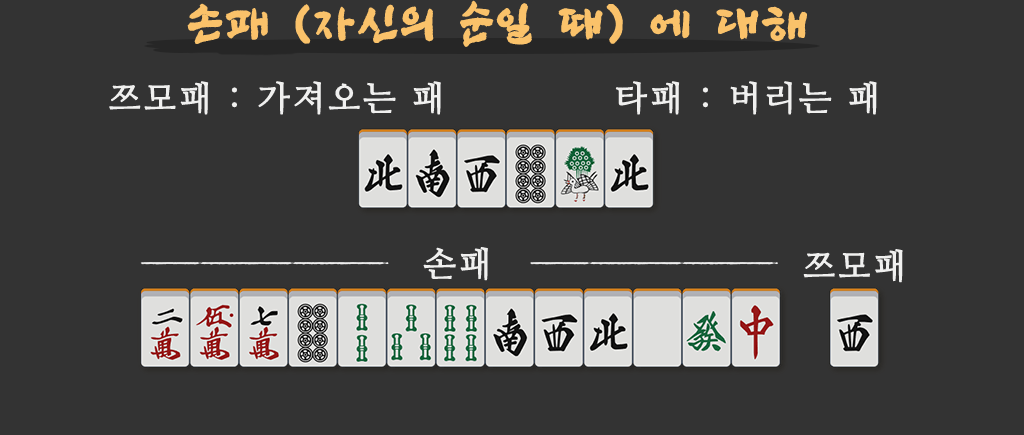
<style>
.page{position:relative;width:1024px;height:435px;background:#333333}
.page>*{position:absolute;margin:0}
.t1{font:48px "SangSangRockOTF";letter-spacing:0.06em;color:#fac26a;font-weight:bold}
.t2{font:34px "NanumMyeongjo";letter-spacing:0.06em;color:#f0f0ef;font-weight:bold}
</style>
<div class="page">
<p class="t1" style="left:187px;top:0px;width:620px;height:47px">손패 (자신의 순일 때) 에 대해</p>
<p class="t2" style="left:109px;top:81px;width:332px;height:34px">쯔모패 : 가져오는 패</p>
<p class="t2" style="left:615px;top:81px;width:262px;height:34px">타패 : 버리는 패</p>
<p class="t2" style="left:423px;top:247px;width:65px;height:34px">손패</p>
<p class="t2" style="left:803px;top:249px;width:100px;height:34px">쯔모패</p>
</div>
